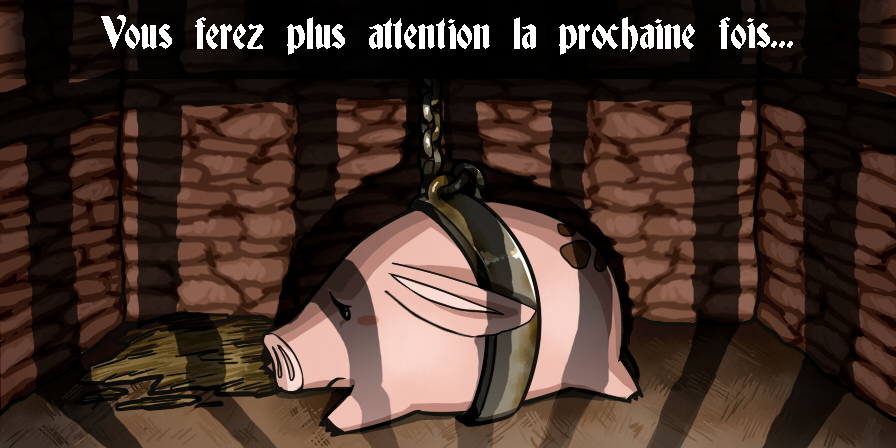
<style>
.page{position:relative;width:896px;height:448px}
.page>*{position:absolute;margin:0}
.t1{font:41.7px "Deutsch-Gothic";color:#ffffff}
</style>
<div class="page">
<p class="t1" style="left:101px;top:15px;width:692px;height:40px">Vous ferez plus attention la prochaine fois...</p>
</div>
